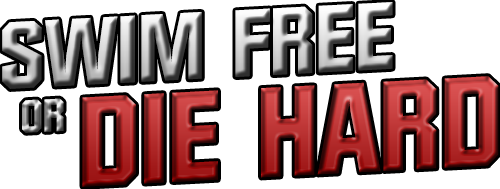
<style>
.page{position:relative;width:500px;height:189px;background:#ffffff}
.page>*{position:absolute;margin:0}
.t1{font:123.9px "Diamante-Bold"}
.t2{font:77.5px "Diamante-Bold"}
</style>
<div class="page">
<p class="t1" style="left:22px;top:76px;width:477px;height:111px;rotate:-3deg"><span class="t2">OR </span>DIE HARD</p>
</div>
